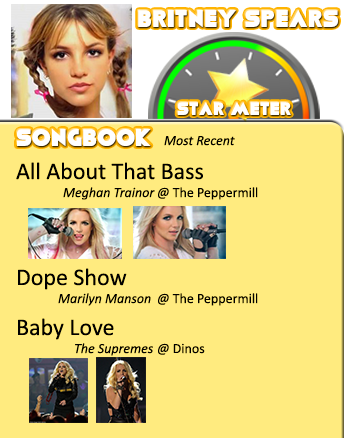
<style>
.page{position:relative;width:344px;height:438px;background:#ffeb7f}
.page>*{position:absolute;margin:0}
.t1{font:24px "Viafont";color:#ffffff}
.t2{font:18px "Viafont";color:#ffffff}
.t3{font:14px "Calibri-Italic";color:#000000}
.t4{font:24px "Calibri";color:#000000}
.t5{font:14px "Calibri";color:#000000}
</style>
<div class="page">
<p class="t1" style="left:138px;top:10px;width:200px;height:17px">Britney Spears</p>
<p class="t2" style="left:177px;top:102px;width:114px;height:13px">Star Meter</p>
<p class="t1" style="left:17px;top:129px;width:134px;height:17px">SongBook</p>
<p class="t3" style="left:164px;top:136px;width:71px;height:10px">Most Recent</p>
<p class="t4" style="left:16px;top:162px;width:187px;height:18px">All About That Bass</p>
<p class="t3" style="left:63px;top:187px;width:92px;height:13px">Meghan Trainor</p>
<p class="t5" style="left:158px;top:187px;width:100px;height:13px"><span class="t3">@ </span>The Peppermill</p>
<p class="t4" style="left:18px;top:268px;width:109px;height:22px">Dope Show</p>
<p class="t3" style="left:58px;top:293px;width:93px;height:13px">Marilyn Manson</p>
<p class="t5" style="left:158px;top:293px;width:100px;height:13px"><span class="t3">@ </span>The Peppermill</p>
<p class="t4" style="left:18px;top:318px;width:96px;height:22px">Baby Love</p>
<p class="t3" style="left:75px;top:343px;width:78px;height:13px">The Supremes</p>
<p class="t5" style="left:158px;top:343px;width:47px;height:12px"><span class="t3">@ </span>Dinos</p>
</div>
